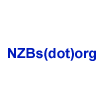
<style>
.page{position:relative;width:104px;height:104px;background:#ffffff}
.page>*{position:absolute;margin:0}
.t1{font:14px "Arial-BoldMT";color:#001bbd}
</style>
<div class="page">
<p class="t1" style="left:8px;top:48px;width:88px;height:13px">NZBs(dot)org</p>
</div>
